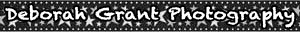
<style>
.page{position:relative;width:300px;height:32px}
.page>*{position:absolute;margin:0}
.t1{font:15.2px "Chalkduster";color:#fefefe;font-weight:bold;scale:1.15 1}
</style>
<div class="page">
<p class="t1" style="left:5px;top:5px;width:290px;height:23px">Deborah Grant Photography</p>
</div>
